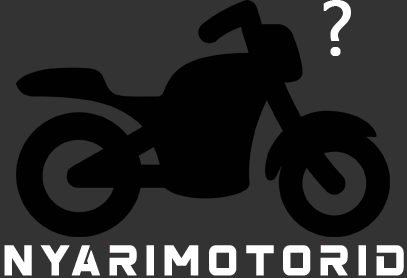
<style>
.page{position:relative;width:407px;height:278px;background:#333333}
.page>*{position:absolute;margin:0}
.t1{font:40.3px "bBigerOver";letter-spacing:0.21em;color:#ffffff;font-weight:bold;scale:0.89 1}
</style>
<div class="page">
<p class="t1" style="left:4px;top:245px;width:400px;height:31px">NYARIMOTORID</p>
</div>
